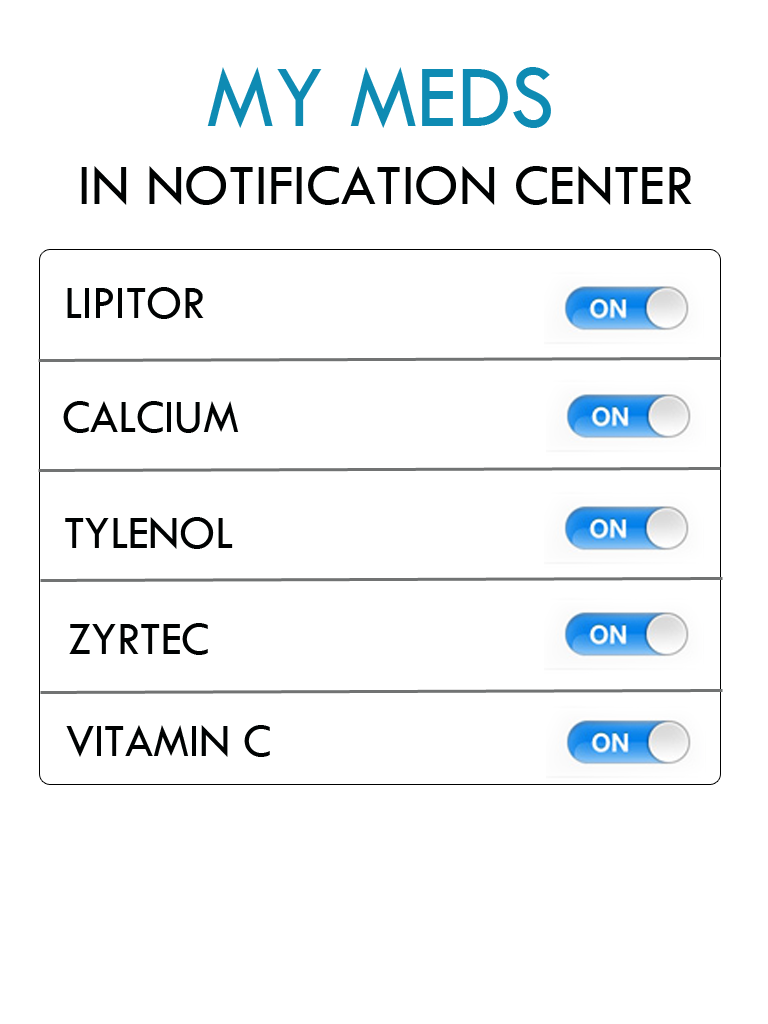
<style>
.page{position:relative;width:768px;height:1024px;background:#ffffff}
.page>*{position:absolute;margin:0}
.t1{font:92px "TwCenMT-Regular";color:#0e8bb3;scale:0.97 1}
.t2{font:60px "TwCenMT-Regular";color:#000202;scale:0.97 1}
.t3{font:48px "TwCenMT-Regular";color:#000202;scale:0.97 1}
</style>
<div class="page">
<p class="t1" style="left:207px;top:67px;width:344px;height:61px">MY MEDS</p>
<p class="t2" style="left:81px;top:166px;width:611px;height:39px">IN NOTIFICATION CENTER</p>
<p class="t3" style="left:67px;top:287px;width:137px;height:32px">LIPITOR</p>
<p class="t3" style="left:63px;top:401px;width:176px;height:32px">CALCIUM</p>
<p class="t3" style="left:65px;top:517px;width:168px;height:32px">TYLENOL</p>
<p class="t3" style="left:69px;top:623px;width:139px;height:32px">ZYRTEC</p>
<p class="t3" style="left:66px;top:725px;width:204px;height:32px">VITAMIN C</p>
</div>
